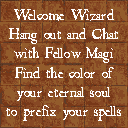
<style>
.page{position:relative;width:128px;height:128px;background:#874824}
.page>*{position:absolute;margin:0}
.t1{font:16px "RomanAntique";color:#ffffff}
</style>
<div class="page">
<p class="t1" style="left:6px;top:9px;width:115px;height:112px;text-align:center">Welcome Wizard<br>Hang out and Chat<br>with Fellow Magi<br>Find the color of<br>your eternal soul<br>to prefix your spells</p>
</div>
